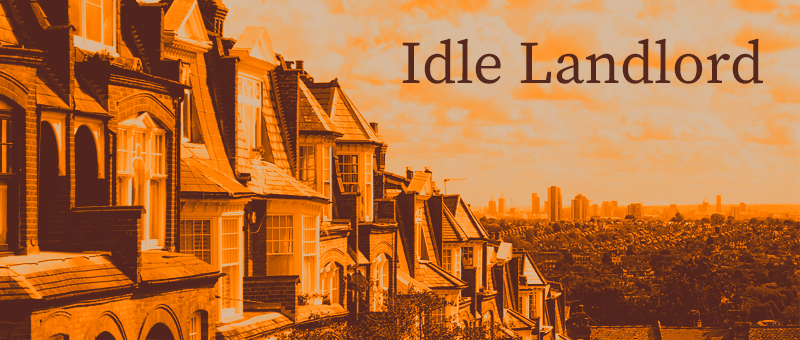
<style>
.page{position:relative;width:800px;height:340px}
.page>*{position:absolute;margin:0}
.t1{font:60px "SourceSerifRoman-Regular";color:#56281d}
</style>
<div class="page">
<p class="t1" style="left:402px;top:38px;width:361px;height:46px">Idle Landlord</p>
</div>
